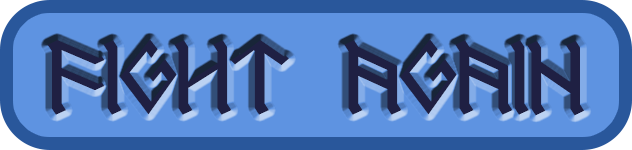
<style>
.page{position:relative;width:632px;height:150px;background:#5e93e1}
.page>*{position:absolute;margin:0}
.t1{font:72px "RUNEnglish1";letter-spacing:-0.04em;color:#202042;scale:1.07 1}
</style>
<div class="page">
<p class="t1" style="left:47px;top:39px;width:538px;height:77px">Fight again</p>
</div>
